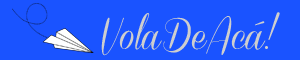
<style>
.page{position:relative;width:300px;height:60px;background:#1a53ff}
.page>*{position:absolute;margin:0}
.t1{font:34.7px "ConeriaScriptDemo";color:#cecece}
</style>
<div class="page">
<p class="t1" style="left:101px;top:12px;width:179px;height:44px">VolaDeAcá!</p>
</div>
